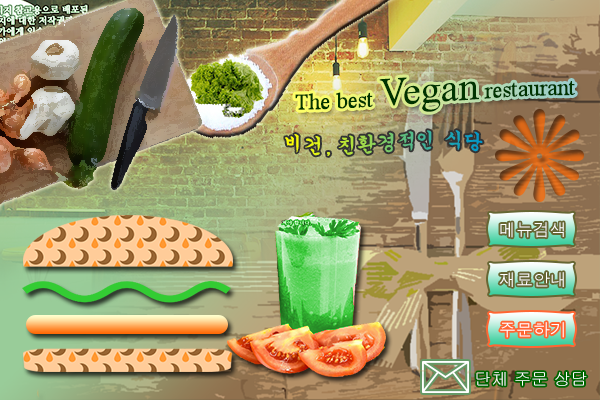
<style>
.page{position:relative;width:600px;height:400px}
.page>*{position:absolute;margin:0}
.t1{font:23px "TimesNewRomanPSMT";color:#003300}
.t2{font:40px "TimesNewRomanPSMT";color:#003300}
.t3{font:20px "Gungsuh"}
.t4{font:17px "Dotum";color:#ffffff}
.t5{font:17px "Gulim";color:#ffffff}
</style>
<div class="page">
<p class="t1" style="left:295px;top:77px;width:280px;height:35px">The best <span class="t2">Vegan</span> restaurant</p>
<p class="t3" style="left:285px;top:130px;width:198px;height:26px">비건, 친환경적인 식당</p>
<p class="t4" style="left:500px;top:222px;width:64px;height:16px">메뉴검색</p>
<p class="t4" style="left:499px;top:272px;width:65px;height:15px">재료안내</p>
<p class="t4" style="left:500px;top:322px;width:64px;height:16px">주문하기</p>
<p class="t5" style="left:476px;top:372px;width:111px;height:14px">단체 주문 상담</p>
</div>
